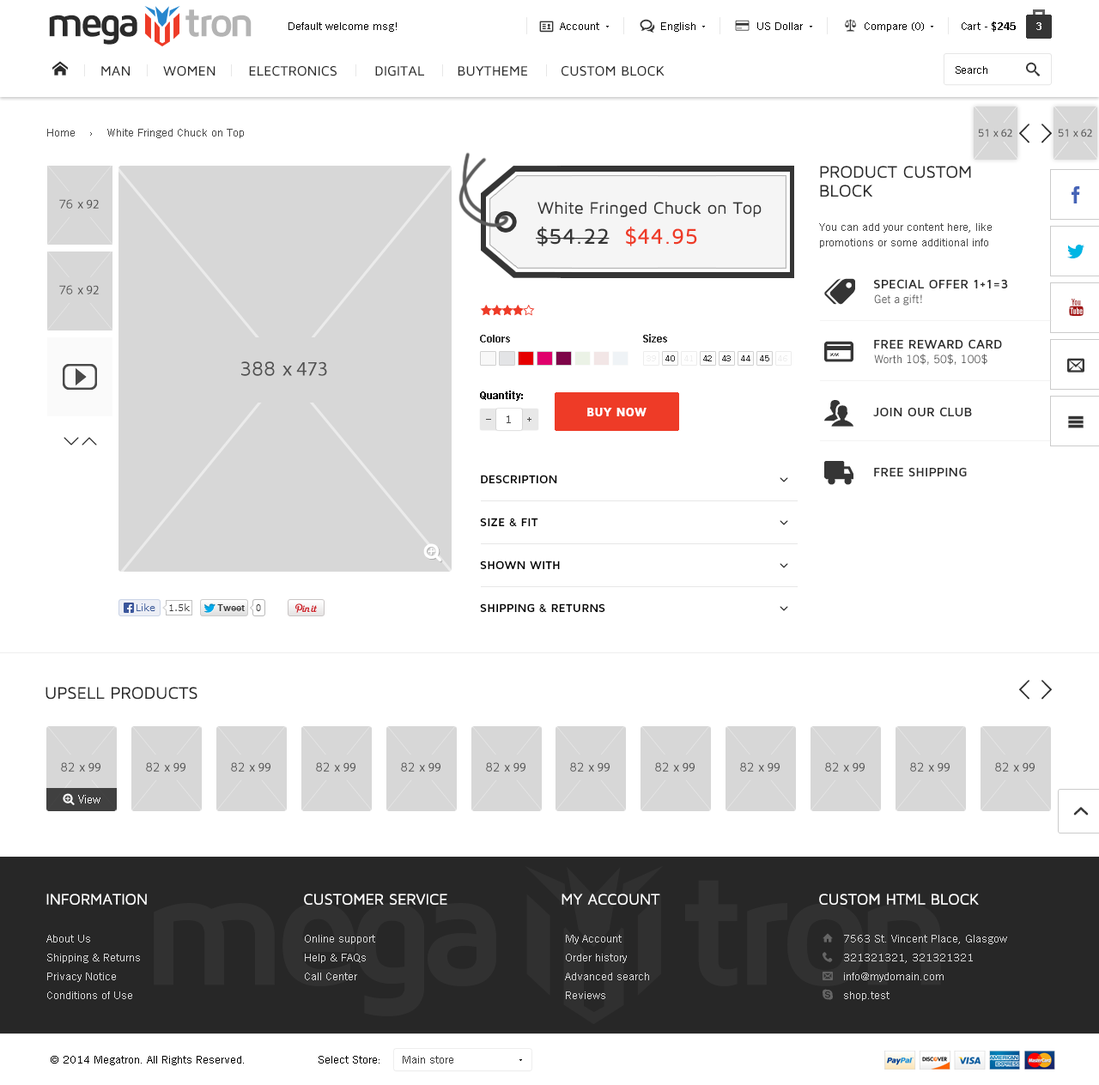
<style>
.page{position:relative;width:1099px;height:1085px;background:#ffffff}
.page>*{position:absolute;margin:0}
.t1{font:41.2px "MavenProBold";letter-spacing:-0.1em;color:#2b2b2b}
.t2{font:41.2px "MavenProBold";letter-spacing:-0.1em;color:#b4b4b4}
.t3{font:11.2px "TradeGothicW01-Roman";color:#000000}
.t4{font:11.2px "TradeGothicW01-Bold2";color:#000000}
.t5{font:10.3px "TradeGothicW01-Bold2";color:#ffffff}
.t6{font:11.2px "TradeGothicW01-Roman";color:#494949}
.t7{font:17.2px/18.9px "MavenProRegular";color:#2b2b2b;text-transform:uppercase}
.t8{font:17.2px "MavenProRegular";color:#353535}
.t9{font:22.3px "MavenProMedium";color:#353535}
.t10{font:22.3px "MavenProMedium";color:#ee3b27}
.t11{font:11.2px/15.5px "TradeGothicW01-Roman";color:#494949}
.t12{font:12.9px "MavenProBold";color:#2b2b2b;text-transform:uppercase}
.t13{font:11.2px "TradeGothicW01-Roman";color:#5b5b5b}
.t14{font:11.2px "TradeGothicW01-Bold2";color:#353535}
.t15{font:8.6px "TradeGothicW01-Roman";color:#efefef;text-transform:uppercase}
.t16{font:8.6px "TradeGothicW01-Roman";color:#353535;text-transform:uppercase}
.t17{font:12px "MavenProBlack";color:#ffffff}
.t18{font:9.4px "TradeGothicW01-Bold2";color:#494949}
.t19{font:12px/42.9px "MavenProBold";color:#000000;text-transform:uppercase}
.t20{font:17.2px "MavenProRegular";color:#2b2b2b;text-transform:uppercase}
.t21{font:12px "TradeGothicW01-Roman";color:#ffffff}
.t22{font:15.5px "MavenProRegular";color:#ffffff;text-transform:uppercase}
.t23{font:11.2px/18.9px "TradeGothicW01-Roman";color:#d9d9d9}
.t24{font:11.2px "TradeGothicW01-Roman";color:#3c3c3c}
</style>
<div class="page">
<p class="t1" style="left:49px;top:9px;width:203px;height:36px">mega     <span class="t2">tron</span></p>
<p class="t3" style="left:288px;top:22px;width:109px;height:10px">Default welcome msg!</p>
<p class="t3" style="left:560px;top:22px;width:39px;height:8px">Account</p>
<p class="t3" style="left:661px;top:22px;width:34px;height:10px">English</p>
<p class="t3" style="left:757px;top:22px;width:46px;height:8px">US Dollar</p>
<p class="t3" style="left:865px;top:22px;width:59px;height:10px">Compare (0)</p>
<p class="t3" style="left:962px;top:21px;width:54px;height:11px">Cart - <span class="t4">$245</span></p>
<p class="t5" style="left:1036px;top:22px;width:5px;height:8px">3</p>
<p class="t3" style="left:956px;top:66px;width:31px;height:8px">Search</p>
<p class="t6" style="left:47px;top:129px;width:197px;height:9px">Home    ›    White Fringed Chuck on Top</p>
<p class="t7" style="left:820px;top:166px;width:151px;height:31px">PRODUCT CUSTOM <br>BLOCK</p>
<p class="t8" style="left:537px;top:202px;width:224px;height:15px">White Fringed Chuck on Top</p>
<p class="t9" style="left:536px;top:227px;width:161px;height:19px">$54.22  <span class="t10">$44.95</span></p>
<p class="t11" style="left:819px;top:223px;width:173px;height:25px">You can add your content here, like <br>promotions or some additional info</p>
<p class="t12" style="left:874px;top:279px;width:134px;height:9px">Special Offer 1+1=3</p>
<p class="t13" style="left:874px;top:294px;width:48px;height:12px">Get a gift!</p>
<p class="t14" style="left:480px;top:335px;width:30px;height:8px">Colors</p>
<p class="t14" style="left:643px;top:334px;width:24px;height:9px">Sizes</p>
<p class="t12" style="left:874px;top:339px;width:128px;height:10px">FREE REWARD CARD</p>
<p class="t13" style="left:874px;top:354px;width:113px;height:11px">Worth 10$, 50$, 100$</p>
<p class="t15" style="left:646px;top:355px;width:10px;height:6px">39</p>
<p class="t16" style="left:665px;top:355px;width:10px;height:6px">40</p>
<p class="t15" style="left:684px;top:355px;width:9px;height:6px">41</p>
<p class="t16" style="left:703px;top:355px;width:9px;height:6px">42</p>
<p class="t16" style="left:722px;top:355px;width:9px;height:6px">43</p>
<p class="t16" style="left:741px;top:355px;width:9px;height:6px">44</p>
<p class="t16" style="left:760px;top:355px;width:9px;height:6px">45</p>
<p class="t15" style="left:778px;top:355px;width:9px;height:6px">46</p>
<p class="t4" style="left:480px;top:391px;width:43px;height:10px">Quantity:</p>
<p class="t17" style="left:587px;top:408px;width:59px;height:8px">BUY NOW</p>
<p class="t12" style="left:873px;top:407px;width:99px;height:9px">Join Our Club</p>
<p class="t6" style="left:507px;top:416px;width:4px;height:7px">1</p>
<p class="t18" style="left:527px;top:417px;width:4px;height:5px">+</p>
<p class="t12" style="left:874px;top:468px;width:93px;height:8px">Free Shipping</p>
<p class="t19" style="left:480px;top:475px;width:125px;height:137px">Description<br>Size &amp; Fit<br>Shown With<br>Shipping &amp; Returns</p>
<p class="t20" style="left:46px;top:687px;width:151px;height:13px">UPSELL PRODUCTS</p>
<p class="t21" style="left:78px;top:795px;width:22px;height:9px">View</p>
<p class="t22" style="left:46px;top:894px;width:101px;height:11px">Information</p>
<p class="t22" style="left:304px;top:894px;width:143px;height:11px">customer service</p>
<p class="t22" style="left:561px;top:894px;width:99px;height:11px">My account</p>
<p class="t22" style="left:819px;top:894px;width:160px;height:11px">CUSTOM HTML BLOCK</p>
<p class="t23" style="left:46px;top:935px;width:94px;height:64px">About Us<br>Shipping &amp; Returns<br>Privacy Notice<br>Conditions of Use</p>
<p class="t23" style="left:305px;top:935px;width:70px;height:45px">Online support<br>Help &amp; FAQs<br>Call Center</p>
<p class="t23" style="left:565px;top:935px;width:84px;height:64px">My Account<br>Order history<br>Advanced search<br>Reviews</p>
<p class="t23" style="left:844px;top:935px;width:163px;height:66px">7563 St. Vincent Place, Glasgow<br>321321321, 321321321<br>info@mydomain.com<br>shop.test</p>
<p class="t3" style="left:51px;top:1056px;width:193px;height:9px">© 2014 Megatron. All Rights Reserved.</p>
<p class="t3" style="left:319px;top:1056px;width:60px;height:8px">Select Store:</p>
<p class="t24" style="left:403px;top:1056px;width:50px;height:8px">Main store</p>
</div>
